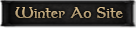
<style>
.page{position:relative;width:136px;height:31px}
.page>*{position:absolute;margin:0}
.t1{font:18.7px "Dumbledor1";color:#bea57c}
</style>
<div class="page">
<p class="t1" style="left:15px;top:7px;width:108px;height:11px">Winter Ao Site</p>
</div>
